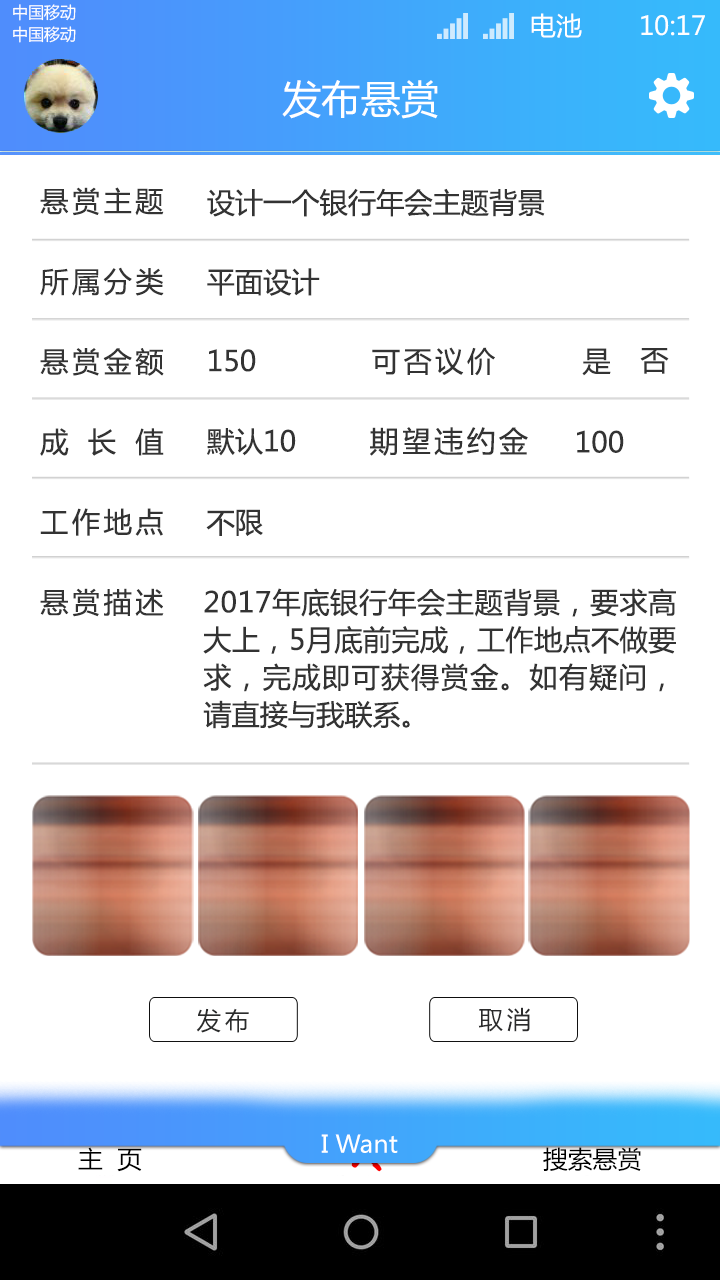
<style>
.page{position:relative;width:720px;height:1280px;background:#ffffff}
.page>*{position:absolute;margin:0}
.t1{font:16.2px "MicrosoftYaHei";color:#ffffff;text-transform:uppercase}
.t2{font:26.1px "MicrosoftYaHei";color:#ffffff;text-transform:uppercase}
.t3{font:39.5px "MicrosoftYaHei";color:#ffffff;text-transform:uppercase}
.t4{font:28.2px/80.2px "MicrosoftYaHei";color:#333333}
.t5{font:28.2px "MicrosoftYaHei";color:#333333}
.t6{font:29.1px "MicrosoftYaHei";color:#333333}
.t7{font:28.2px/37.4px "MicrosoftYaHei";color:#333333}
.t8{font:24.5px "MicrosoftYaHei";letter-spacing:0.15em;color:#2b2c2c}
.t9{font:24.5px "MicrosoftYaHei";letter-spacing:0.15em;color:#2b2b2c}
.t10{font:24.3px "MicrosoftYaHei";color:#ffffff}
.t11{font:24.3px "MicrosoftYaHei";color:#000000}
</style>
<div class="page">
<p class="t1" style="left:13px;top:4px;width:63px;height:17px">中国移动</p>
<p class="t2" style="left:531px;top:13px;width:51px;height:25px">电池</p>
<p class="t2" style="left:641px;top:15px;width:64px;height:21px">10:17</p>
<p class="t1" style="left:13px;top:26px;width:63px;height:17px">中国移动</p>
<p class="t3" style="left:282px;top:80px;width:156px;height:39px">发布悬赏</p>
<p class="t4" style="left:40px;top:187px;width:124px;height:430px;text-align:justify">悬赏主题<br>所属分类<br>悬赏金额<br>成长值<br>工作地点<br>悬赏描述</p>
<p class="t5" style="left:207px;top:188px;width:338px;height:29px">设计一个银行年会主题背景</p>
<p class="t5" style="left:207px;top:268px;width:113px;height:28px">平面设计</p>
<p class="t5" style="left:209px;top:349px;width:47px;height:23px">150</p>
<p class="t5" style="left:372px;top:347px;width:123px;height:29px">可否议价</p>
<p class="t5" style="left:582px;top:348px;width:29px;height:28px">是</p>
<p class="t5" style="left:640px;top:348px;width:29px;height:26px">否</p>
<p class="t5" style="left:207px;top:428px;width:89px;height:28px">默认10</p>
<p class="t6" style="left:370px;top:427px;width:158px;height:29px">期望违约金</p>
<p class="t5" style="left:577px;top:430px;width:47px;height:23px">100</p>
<p class="t5" style="left:206px;top:509px;width:57px;height:27px">不限</p>
<p class="t7" style="left:203px;top:588px;width:473px;height:141px;text-align:justify">2017年底银行年会主题背景，要求高大上，5月底前完成，工作地点不做要求，完成即可获得赏金。如有疑问，请直接与我联系。</p>
<p class="t8" style="left:196px;top:1008px;width:53px;height:25px">发布</p>
<p class="t9" style="left:478px;top:1007px;width:52px;height:25px">取消</p>
<p class="t10" style="left:321px;top:1134px;width:77px;height:19px">I Want</p>
<p class="t11" style="left:78px;top:1147px;width:64px;height:25px">主  页</p>
<p class="t11" style="left:543px;top:1147px;width:98px;height:24px">搜索悬赏</p>
</div>
